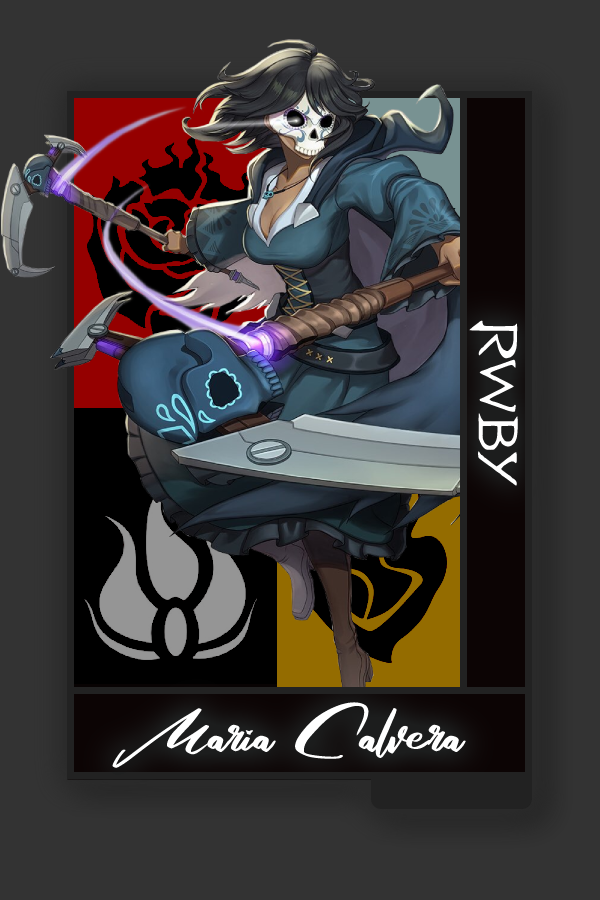
<style>
.page{position:relative;width:600px;height:900px;background:#333333}
.page>*{position:absolute;margin:0}
.t1{font:61.3px "RWBY_Style";color:#ffffff;scale:1.25 1}
.t2{font:75px "RosegaFREE";color:#ffffff}
</style>
<div class="page">
<p class="t1" style="left:469px;top:320px;width:49px;height:166px;rotate:90deg">RWBY</p>
<p class="t2" style="left:112px;top:702px;width:354px;height:66px">Maria Calvera</p>
</div>
